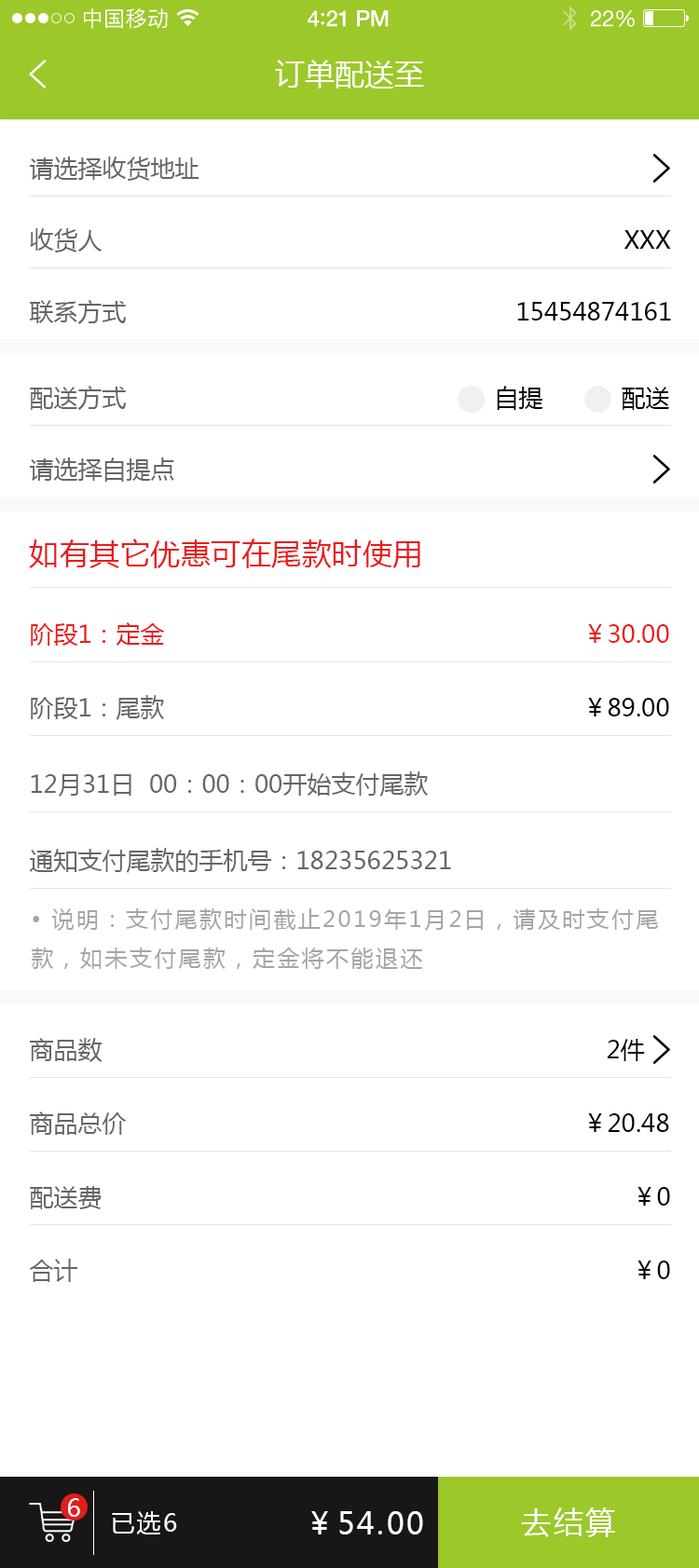
<style>
.page{position:relative;width:699px;height:1568px;background:#ffffff}
.page>*{position:absolute;margin:0}
.t1{font:21.4px "PingFangSC-Regular";letter-spacing:0.02em;color:#ffffff}
.t2{font:22.4px "HelveticaNeue-Medium";letter-spacing:-0.02em;color:#ffffff}
.t3{font:24.2px "Avenir-Medium";letter-spacing:-0.02em;color:#ffffff}
.t4{font:22.4px "HelveticaNeue";letter-spacing:-0.02em;color:#ffffff}
.t5{font:29.8px "MicrosoftYaHei";color:#ffffff;text-transform:uppercase}
.t6{font:24.2px "MicrosoftYaHei";color:#666666;text-transform:uppercase}
.t7{font:24.2px "MicrosoftYaHei";color:#000000;text-transform:uppercase}
.t8{font:29.8px "MicrosoftYaHei";letter-spacing:0.015em;color:#eb1b1b;text-transform:uppercase}
.t9{font:24.2px "MicrosoftYaHei";color:#eb1b1b;text-transform:uppercase}
.t10{font:22.4px "MicrosoftYaHei";letter-spacing:0.1em;color:#a5a5a5;text-transform:uppercase}
.t11{font:24.2px "MicrosoftYaHei";letter-spacing:0.08em;color:#ffffff;text-transform:uppercase}
.t12{font:29.8px "MicrosoftYaHei";letter-spacing:0.08em;color:#ffffff;text-transform:uppercase}
</style>
<div class="page">
<p class="t1" style="left:84px;top:8px;width:84px;height:21px">中国移动</p>
<p class="t2" style="left:307px;top:10px;width:82px;height:17px">4<span class="t3">:</span>21 PM</p>
<p class="t4" style="left:590px;top:10px;width:44px;height:17px">22%</p>
<p class="t5" style="left:275px;top:60px;width:149px;height:29px">订单配送至</p>
<p class="t6" style="left:30px;top:157px;width:169px;height:24px">请选择收货地址</p>
<p class="t6" style="left:30px;top:228px;width:72px;height:24px">收货人</p>
<p class="t7" style="left:623px;top:230px;width:48px;height:19px">xxx</p>
<p class="t6" style="left:29px;top:300px;width:98px;height:24px">联系方式</p>
<p class="t7" style="left:517px;top:302px;width:154px;height:18px">15454874161</p>
<p class="t6" style="left:30px;top:386px;width:97px;height:24px">配送方式</p>
<p class="t7" style="left:497px;top:386px;width:46px;height:24px">自提</p>
<p class="t7" style="left:621px;top:387px;width:48px;height:23px">配送</p>
<p class="t6" style="left:30px;top:457px;width:144px;height:25px">请选择自提点</p>
<p class="t8" style="left:29px;top:539px;width:391px;height:29px">如有其它优惠可在尾款时使用</p>
<p class="t9" style="left:31px;top:622px;width:134px;height:24px">阶段1：定金</p>
<p class="t9" style="left:588px;top:624px;width:81px;height:19px">￥30.00</p>
<p class="t6" style="left:31px;top:695px;width:133px;height:25px">阶段1：尾款</p>
<p class="t7" style="left:588px;top:698px;width:81px;height:18px">￥89.00</p>
<p class="t6" style="left:31px;top:771px;width:397px;height:26px">12月31日  00：00：00开始支付尾款</p>
<p class="t6" style="left:30px;top:848px;width:421px;height:25px">通知支付尾款的手机号：18235625321</p>
<p class="t10" style="left:32px;top:908px;width:626px;height:61px">• 说明：支付尾款时间截止2019年1月2日，请及时支付尾<br>款，如未支付尾款，定金将不能退还</p>
<p class="t6" style="left:30px;top:1038px;width:72px;height:24px">商品数</p>
<p class="t7" style="left:607px;top:1039px;width:38px;height:22px">2件</p>
<p class="t6" style="left:30px;top:1111px;width:97px;height:24px">商品总价</p>
<p class="t7" style="left:588px;top:1113px;width:81px;height:19px">￥20.48</p>
<p class="t6" style="left:30px;top:1186px;width:72px;height:23px">配送费</p>
<p class="t7" style="left:637px;top:1187px;width:33px;height:19px">￥0</p>
<p class="t6" style="left:29px;top:1259px;width:48px;height:23px">合计</p>
<p class="t7" style="left:637px;top:1261px;width:33px;height:18px">￥0</p>
<p class="t11" style="left:68px;top:1498px;width:12px;height:19px">6</p>
<p class="t11" style="left:112px;top:1511px;width:65px;height:23px">已选6</p>
<p class="t12" style="left:311px;top:1511px;width:112px;height:23px">￥54.00</p>
<p class="t12" style="left:521px;top:1507px;width:94px;height:30px">去结算</p>
</div>
